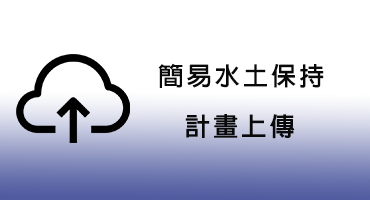
<style>
.page{position:relative;width:370px;height:200px;background:#ffffff}
.page>*{position:absolute;margin:0}
.t1{font:25px "AdobeFanHeitiStd-Bold";letter-spacing:0.1em;color:#0a0909;font-weight:bold}
</style>
<div class="page">
<p class="t1" style="left:158px;top:63px;width:166px;height:25px">簡易水土保持</p>
<p class="t1" style="left:185px;top:114px;width:110px;height:25px">計畫上傳</p>
</div>
